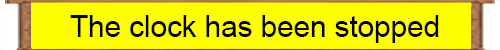
<style>
.page{position:relative;width:500px;height:50px;background:#ffff00}
.page>*{position:absolute;margin:0}
.t1{font:29.6px "ArialMT";color:#000000}
</style>
<div class="page">
<p class="t1" style="left:70px;top:15px;width:369px;height:28px">The clock has been stopped</p>
</div>
